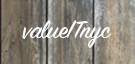
<style>
.page{position:relative;width:135px;height:64px}
.page>*{position:absolute;margin:0}
.t1{font:27.8px "SignPainter-HouseScript";color:#ffffff}
</style>
<div class="page">
<p class="t1" style="left:22px;top:20px;width:89px;height:28px">valueITnyc</p>
</div>
